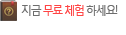
<style>
.page{position:relative;width:126px;height:35px;background:#ffffff}
.page>*{position:absolute;margin:0}
.t1{font:12px "MalgunGothicRegular";letter-spacing:-0.15em;color:#ff4444;scale:0.95 1}
.t2{font:12px "MalgunGothicRegular";letter-spacing:-0.15em;color:#6e6e6e;scale:0.95 1}
</style>
<div class="page">
<p class="t1" style="left:21px;top:4px;width:97px;height:12px"><span class="t2">지금 </span>무료 체험<span class="t2"> 하세요!</span></p>
</div>
